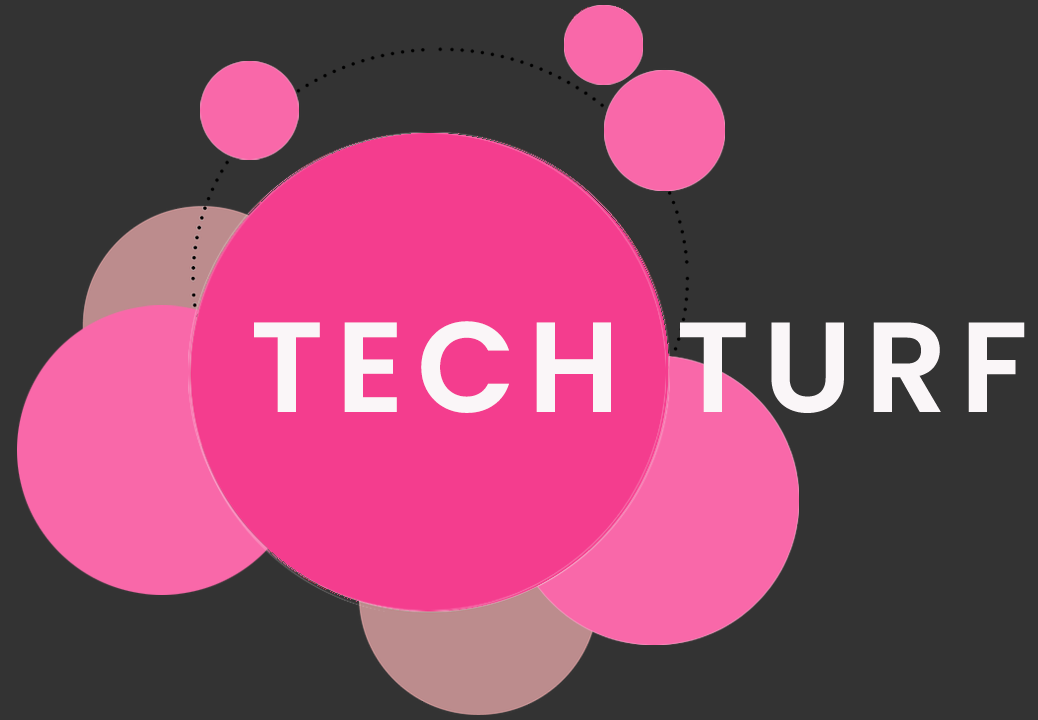
<style>
.page{position:relative;width:1038px;height:720px;background:#333333}
.page>*{position:absolute;margin:0}
.t1{font:128px "Poppins-SemiBold";letter-spacing:0.1em;color:#faf6f8}
</style>
<div class="page">
<p class="t1" style="left:254px;top:321px;width:771px;height:92px">TECH TURF</p>
</div>
